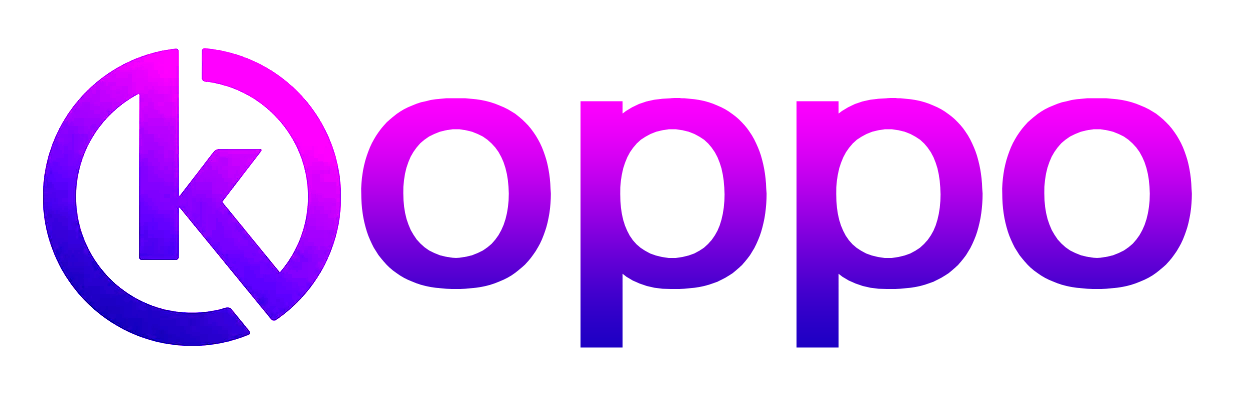
<style>
.page{position:relative;width:1253px;height:415px;background:#ffffff}
.page>*{position:absolute;margin:0}
.t1{font:293.3px "SinkinSans-500Medium";letter-spacing:-0.044em;font-weight:bold}
</style>
<div class="page">
<p class="t1" style="left:361px;top:98px;width:831px;height:250px">oppo</p>
</div>
